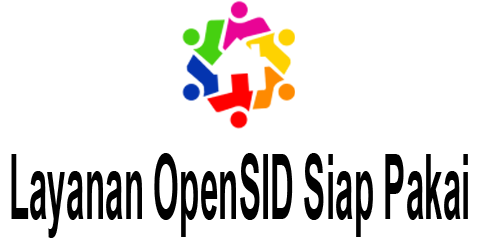
<style>
.page{position:relative;width:480px;height:240px;background:#ffffff}
.page>*{position:absolute;margin:0}
.t1{font:90px "Arial-BoldMT";color:#000000;scale:0.37 1}
</style>
<div class="page">
<p class="t1" style="left:11px;top:153px;width:457px;height:85px">Layanan OpenSID Siap Pakai</p>
</div>
